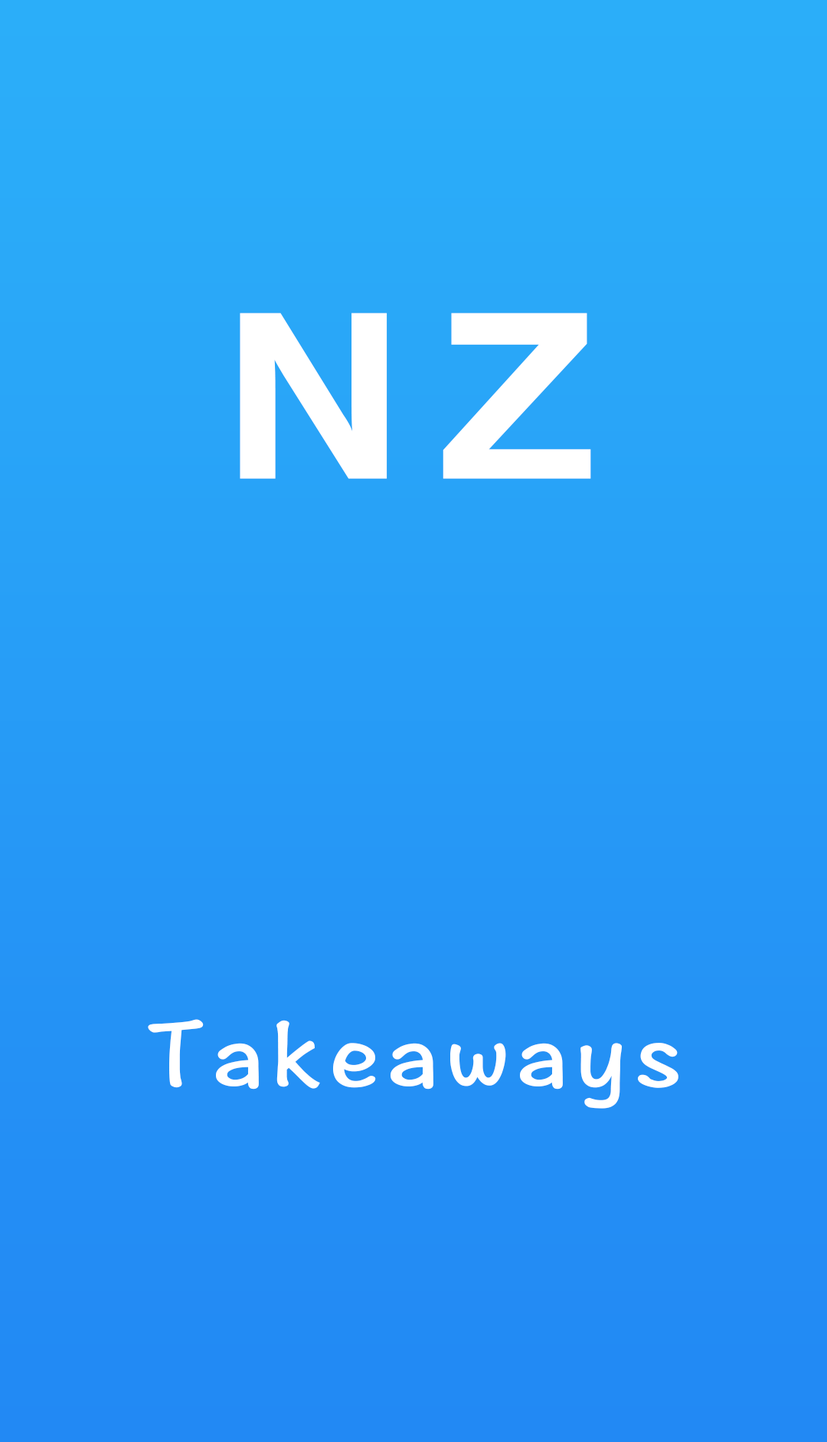
<style>
.page{position:relative;width:827px;height:1442px}
.page>*{position:absolute;margin:0}
.t1{font:191.5px "FZLTTHK--GBK1-0";letter-spacing:0.2em;color:#ffffff}
.t2{font:95.7px "HannotateSC-W7";letter-spacing:0.075em;color:#ffffff}
</style>
<div class="page">
<p class="t1" style="left:240px;top:313px;width:351px;height:166px">NZ</p>
<p class="t2" style="left:148px;top:1019px;width:531px;height:89px">Takeaways</p>
</div>
